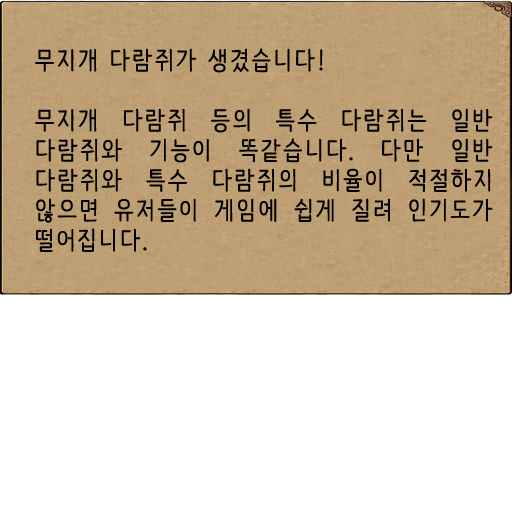
<style>
.page{position:relative;width:512px;height:512px;background:#ffffff}
.page>*{position:absolute;margin:0}
.t1{font:25px "NanumBarunpen";letter-spacing:0.075em;color:#000000;font-weight:bold}
</style>
<div class="page">
<p class="t1" style="left:35px;top:48px;width:458px;height:204px;text-align:justify">무지개 다람쥐가 생겼습니다!<br><br>무지개 다람쥐 등의 특수 다람쥐는 일반 다람쥐와 기능이 똑같습니다. 다만 일반 다람쥐와 특수 다람쥐의 비율이 적절하지 않으면 유저들이 게임에 쉽게 질려 인기도가 떨어집니다.</p>
</div>
